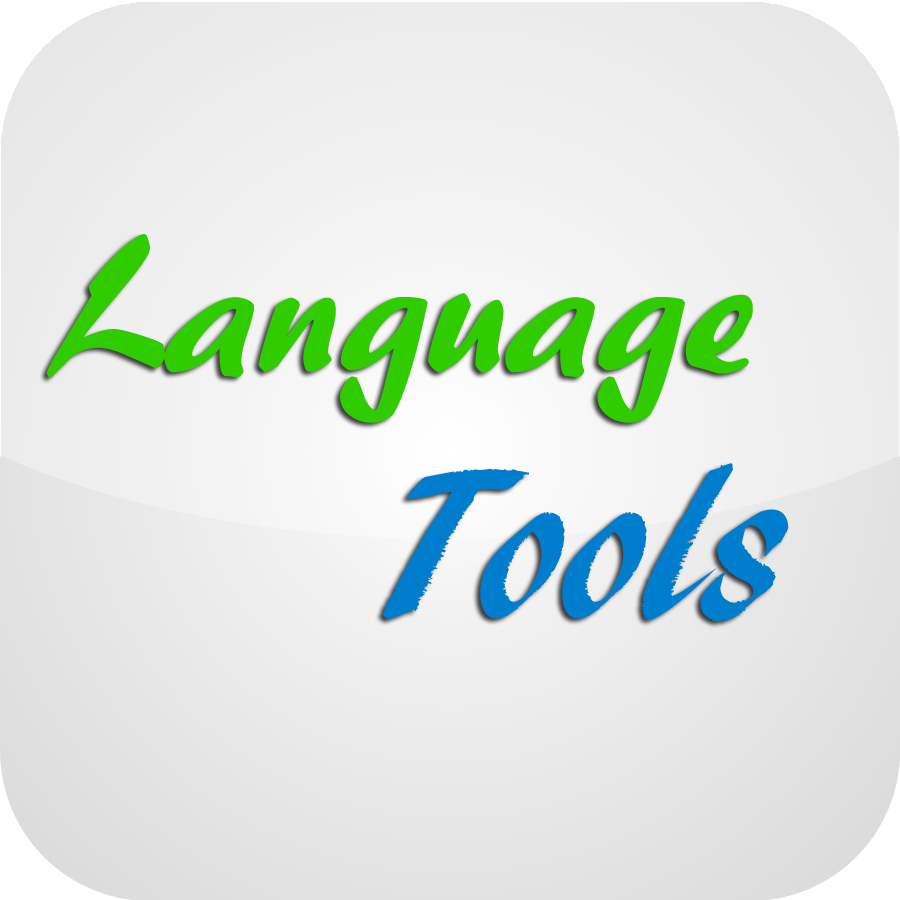
<style>
.page{position:relative;width:900px;height:900px}
.page>*{position:absolute;margin:0}
.t1{font:194.7px "ARBERKLEY";color:#30cc00}
.t2{font:219.7px "ARBLANCA";color:#007dcc}
</style>
<div class="page">
<p class="t1" style="left:47px;top:234px;width:706px;height:189px">Language</p>
<p class="t2" style="left:382px;top:463px;width:407px;height:159px">Tools</p>
</div>
